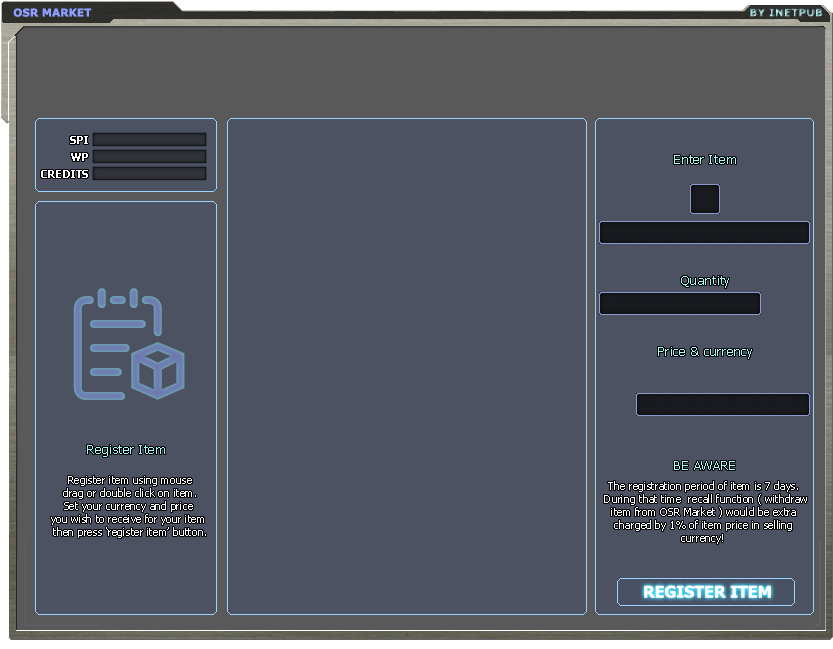
<style>
.page{position:relative;width:833px;height:649px;background:#4c5262}
.page>*{position:absolute;margin:0}
.t1{font:10.7px "Verdana-Bold";color:#8ea0ff}
.t2{font:10.7px "Verdana-Bold"}
.t3{font:10.7px "Tahoma-Bold";color:#ffffff}
.t4{font:13.3px "Tahoma";color:#a4fff7}
.t5{font:10.7px "Tahoma";color:#ffffff}
.t6{font:16px "Tahoma-Bold";color:#ffffff}
</style>
<div class="page">
<p class="t1" style="left:13px;top:8px;width:79px;height:9px">OSR MARKET</p>
<p class="t2" style="left:750px;top:8px;width:73px;height:9px">BY INETPUB</p>
<p class="t3" style="left:70px;top:136px;width:18px;height:8px">SPI</p>
<p class="t3" style="left:71px;top:153px;width:17px;height:8px">WP</p>
<p class="t4" style="left:674px;top:155px;width:62px;height:9px">Enter Item</p>
<p class="t3" style="left:41px;top:170px;width:47px;height:8px">CREDITS</p>
<p class="t4" style="left:681px;top:276px;width:48px;height:12px">Quantity</p>
<p class="t4" style="left:658px;top:347px;width:94px;height:12px">Price &amp; currency</p>
<p class="t4" style="left:87px;top:445px;width:78px;height:12px">Register Item</p>
<p class="t4" style="left:674px;top:461px;width:61px;height:9px">BE AWARE</p>
<p class="t5" style="left:51px;top:476px;width:155px;height:62px;text-align:center">Register item using mouse<br>drag or double click on item.<br>Set your currency and price <br>you wish to receive for your item <br>then press ‘register item’ button.</p>
<p class="t5" style="left:604px;top:481px;width:203px;height:63px">The registration period of item is 7 days.<br> During that time  recall function ( withdraw<br>   item from OSR Market ) would be extra <br>    charged by 1% of item price in selling<br>                        currency!</p>
<p class="t6" style="left:644px;top:585px;width:127px;height:13px">REGISTER ITEM</p>
</div>
